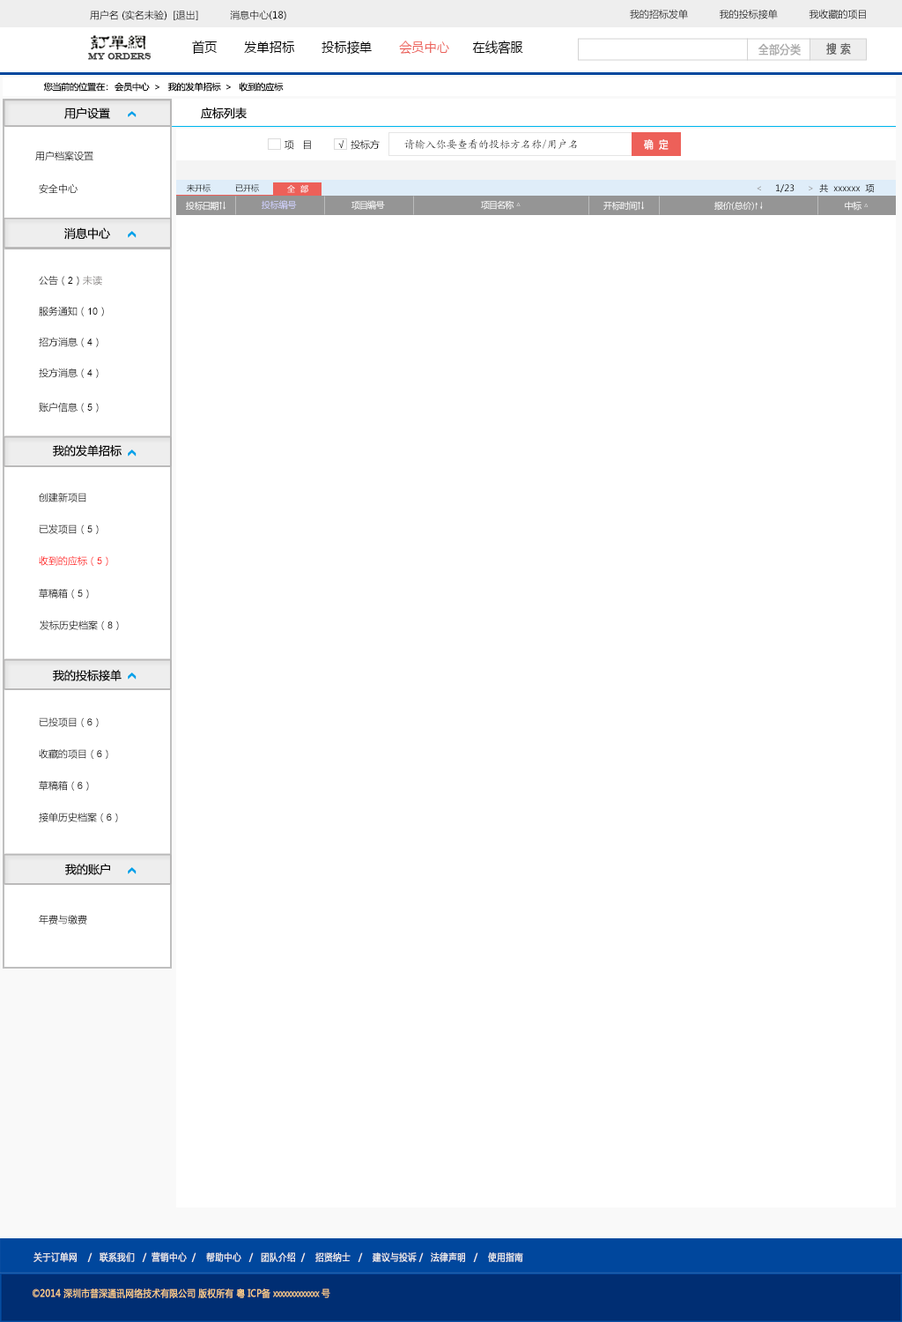
<style>
.page{position:relative;width:902px;height:1322px;background:#ffffff}
.page>*{position:absolute;margin:0}
.t1{font:9.7px "MicrosoftYaHei";color:#000000}
.t2{font:13.6px "MicrosoftYaHei";color:#000000;font-variant:small-caps;scale:0.94 1}
.t3{font:13.6px "MicrosoftYaHei";color:#ed6059;font-variant:small-caps;scale:0.94 1}
.t4{font:8.7px "EngraversMT";color:#434343;font-variant:small-caps;font-weight:bold;scale:0.86 1}
.t5{font:11.6px "MicrosoftYaHei";color:#aaaaaa;font-variant:small-caps;font-weight:bold;scale:0.86 1}
.t6{font:11.6px "MicrosoftYaHei";color:#626262;font-variant:small-caps;font-weight:bold;scale:0.86 1}
.t7{font:8.8px "MicrosoftYaHei";color:#060606}
.t8{font:11.5px "MicrosoftYaHei";color:#060606}
.t9{font:10.6px "KaiTi_GB2312"}
.t10{font:10.7px "MicrosoftYaHei";color:#ffffff;font-variant:small-caps;font-weight:bold;scale:0.86 1}
.t11{font:9.7px "MicrosoftYaHei";color:#060606}
.t12{font:9.7px "MicrosoftYaHei"}
.t13{font:8px "MicrosoftYaHei";color:#000000}
.t14{font:8px "MicrosoftYaHei"}
.t15{font:8px "MicrosoftYaHei";color:#ffffff}
.t16{font:8.8px "MicrosoftYaHei";color:#ffffff}
.t17{font:8.8px "MicrosoftYaHei";color:#d1d2ff}
.t18{font:8.8px "SimSun";color:#ffffff}
.t19{font:9.7px "ArialMT";color:#060606}
.t20{font:9.7px "MicrosoftYaHei";color:#888584}
.t21{font:9.7px "ArialMT";color:#000000}
.t22{font:9.7px "MicrosoftYaHei";color:#ff0000}
.t23{font:9.7px "ArialMT";color:#ff0000}
.t24{font:9.7px "MicrosoftYaHei";color:#eeeeee;font-variant:small-caps;font-weight:bold;scale:0.86 1}
.t25{font:13.6px "STXihei";color:#eeeeee;font-variant:small-caps;font-weight:bold;scale:0.86 1}
.t26{font:9.7px "MicrosoftYaHei";color:#facd89;font-variant:small-caps;font-weight:bold;scale:0.87 1}
.t27{font:9.7px "MicrosoftYaHei";color:#eeeeee;font-variant:small-caps;font-weight:bold;scale:0.87 1}
</style>
<div class="page">
<p class="t1" style="left:90px;top:10px;width:196px;height:10px">用户名 (实名未验)  [退出]           消息中心(18)</p>
<p class="t1" style="left:630px;top:9px;width:236px;height:10px">我的招标发单           我的投标接单           我收藏的项目</p>
<p class="t2" style="left:192px;top:41px;width:331px;height:14px">首页       发单招标       投标接单       <span class="t3">会员中心</span>      在线客服</p>
<p class="t4" style="left:88px;top:53px;width:64px;height:7px">MY ORDERS</p>
<p class="t5" style="left:759px;top:43px;width:42px;height:13px">全部分类</p>
<p class="t6" style="left:826px;top:42px;width:25px;height:13px">搜 索</p>
<p class="t7" style="left:43px;top:82px;width:241px;height:10px">您当前的位置在：  会员中心  &gt;   我的发单招标  &gt;   收到的应标</p>
<p class="t8" style="left:64px;top:107px;width:46px;height:12px">用户设置</p>
<p class="t8" style="left:201px;top:107px;width:46px;height:12px">应标列表</p>
<p class="t1" style="left:285px;top:139px;width:95px;height:11px">项   目         √  投标方</p>
<p class="t9" style="left:404px;top:139px;width:173px;height:11px">请输入你要查看的投标方名称/用户名</p>
<p class="t10" style="left:644px;top:139px;width:25px;height:11px">确  定</p>
<p class="t11" style="left:35px;top:151px;width:58px;height:10px">用户档案设置</p>
<p class="t12" style="left:39px;top:183px;width:39px;height:11px">安全中心</p>
<p class="t13" style="left:187px;top:184px;width:24px;height:8px">未开标</p>
<p class="t14" style="left:235px;top:184px;width:24px;height:8px">已开标</p>
<p class="t15" style="left:287px;top:185px;width:21px;height:8px">全  部</p>
<p class="t7" style="left:757px;top:184px;width:118px;height:9px">&lt;     1/23     &gt;  共  xxxxxx  项</p>
<p class="t16" style="left:186px;top:201px;width:40px;height:10px">投标日期↑↓</p>
<p class="t17" style="left:262px;top:200px;width:35px;height:10px">投标编号</p>
<p class="t16" style="left:352px;top:200px;width:33px;height:10px">项目编号</p>
<p class="t16" style="left:481px;top:200px;width:40px;height:10px">项目名称 △</p>
<p class="t16" style="left:604px;top:201px;width:41px;height:10px">开标时间↑↓</p>
<p class="t16" style="left:715px;top:201px;width:48px;height:10px">报价(总价)<span class="t18">↑↓</span></p>
<p class="t16" style="left:845px;top:201px;width:24px;height:10px">中标 △</p>
<p class="t8" style="left:64px;top:227px;width:46px;height:13px">消息中心</p>
<p class="t11" style="left:39px;top:275px;width:63px;height:10px">公告（<span class="t19">2</span>）<span class="t20">未读</span></p>
<p class="t11" style="left:39px;top:306px;width:65px;height:10px">服务通知（<span class="t19">10</span>）</p>
<p class="t11" style="left:39px;top:337px;width:60px;height:10px">招方消息（<span class="t19">4</span>）</p>
<p class="t11" style="left:39px;top:367px;width:60px;height:11px">投方消息（<span class="t19">4</span>）</p>
<p class="t11" style="left:39px;top:402px;width:60px;height:10px">账户信息（<span class="t19">5</span>）</p>
<p class="t8" style="left:53px;top:445px;width:69px;height:11px">我的发单招标</p>
<p class="t12" style="left:39px;top:493px;width:47px;height:9px">创建新项目</p>
<p class="t1" style="left:39px;top:524px;width:60px;height:10px">已发项目（<span class="t21">5</span>）</p>
<p class="t22" style="left:39px;top:556px;width:69px;height:10px">收到的应标（<span class="t23">5</span>）</p>
<p class="t11" style="left:39px;top:589px;width:50px;height:9px">草稿箱（<span class="t19">5</span>）</p>
<p class="t11" style="left:40px;top:620px;width:79px;height:10px">发标历史档案（<span class="t19">8</span>）</p>
<p class="t8" style="left:53px;top:670px;width:69px;height:11px">我的投标接单</p>
<p class="t11" style="left:39px;top:717px;width:60px;height:10px">已投项目（<span class="t19">6</span>）</p>
<p class="t11" style="left:39px;top:749px;width:69px;height:10px">收藏的项目（<span class="t19">6</span>）</p>
<p class="t11" style="left:39px;top:781px;width:50px;height:9px">草稿箱（<span class="t19">6</span>）</p>
<p class="t11" style="left:39px;top:812px;width:79px;height:10px">接单历史档案（<span class="t19">6</span>）</p>
<p class="t8" style="left:65px;top:863px;width:45px;height:12px">我的账户</p>
<p class="t11" style="left:39px;top:915px;width:48px;height:9px">年费与缴费</p>
<p class="t24" style="left:33px;top:1251px;width:490px;height:11px"><span class="t25"><br><br></span>关于订单网    /   联系我们   /  营销中心  /    帮助中心   /   团队介绍  /    招贤纳士   /    建议与投诉 /   法律声明   /    使用指南</p>
<p class="t26" style="left:33px;top:1288px;width:297px;height:10px"><span class="t27"> </span>©2014 深圳市普深通讯网络技术有限公司 版权所有 粤 ICP备 xxxxxxxxxxxxx 号</p>
</div>
